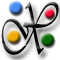
<style>
.page{position:relative;width:60px;height:60px}
.page>*{position:absolute;margin:0}
.t1{font:75.2px "Vivaldii";color:#090908;scale:0.58 1}
</style>
<div class="page">
<p class="t1" style="left:1px;top:1px;width:58px;height:54px">X</p>
</div>
